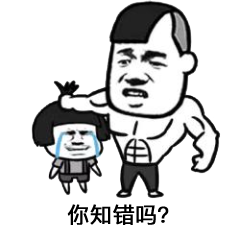
<style>
.page{position:relative;width:240px;height:238px;background:#ffffff}
.page>*{position:absolute;margin:0}
.t1{font:22px "PingFangSC-Regular";color:#000000;font-weight:bold}
</style>
<div class="page">
<p class="t1" style="left:67px;top:204px;width:102px;height:21px">你知错吗？</p>
</div>
